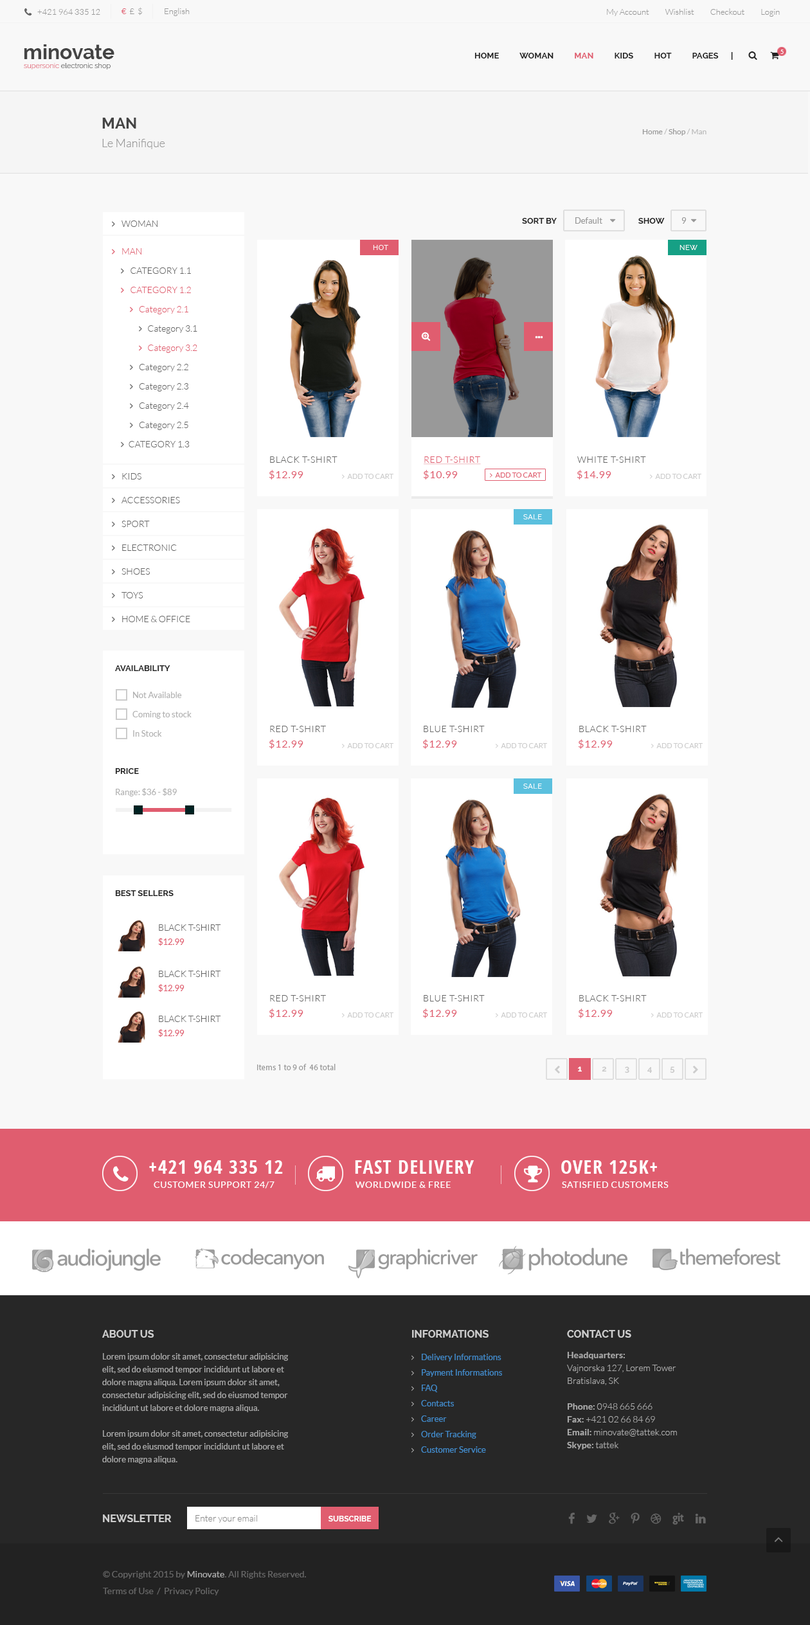
<style>
.page{position:relative;width:810px;height:1625px;background:#ffffff}
.page>*{position:absolute;margin:0}
.t1{font:8.4px "Lato-Light";color:#999999;text-transform:uppercase}
.t2{font:8.4px "Lato-Light";color:#999999}
.t3{font:8.4px "Lato-Light";color:#e05d6f}
.t4{font:20.6px "Raleway-Bold";color:#444444}
.t5{font:5.8px "Lato-Regular";color:#ffffff;text-transform:uppercase}
.t6{font:7.1px "Raleway-Light";color:#444444}
.t7{font:7.1px "Raleway-Light";color:#e05d6f}
.t8{font:15.4px "Raleway-Bold";color:#444444;text-transform:uppercase}
.t9{font:7.7px "Lato-Regular";color:#bbbbbb}
.t10{font:7.7px "Lato-Regular";color:#999999}
.t11{font:11.6px "Lato-Light";color:#999999}
.t12{font:9px "Lato-Light";color:#666666;text-transform:uppercase}
.t13{font:8.4px "Raleway-Bold";color:#222222;text-transform:uppercase}
.t14{font:7.1px "Raleway";letter-spacing:0.05em;color:#ffffff;text-transform:uppercase}
.t15{font:9px/19.3px "Lato-Light";color:#666666}
.t16{font:9px/19.3px "Lato-Light";color:#e05d6f;text-transform:uppercase}
.t17{font:9px/19.3px "Lato-Light";color:#666666;text-transform:uppercase}
.t18{font:9px/19.3px "Lato-Light";color:#e05d6f}
.t19{font:9px "Lato-Light";letter-spacing:0.05em;color:#666666;text-transform:uppercase}
.t20{font:9px "Lato-Light";letter-spacing:0.05em;color:#e05d6f;text-transform:uppercase;text-decoration:underline}
.t21{font:10.3px "Lato-Regular";letter-spacing:0.05em;color:#e05d6f;text-transform:uppercase}
.t22{font:8.4px/19.3px "Lato-Regular";color:#b2b2b2}
.t23{font:8.4px "Lato-Regular";color:#b2b2b2;text-transform:uppercase}
.t24{font:8.4px "Lato-Regular";color:#b2b2b2}
.t25{font:8.4px "Lato-Regular";color:#e05d6f}
.t26{font:8.4px "MyriadPro-Regular";color:#999999}
.t27{font:19.3px "OpenSans-CondensedBold";letter-spacing:0.05em;color:#ffffff;text-transform:uppercase}
.t28{font:9px "Lato-Regular";letter-spacing:0.05em;color:#ffffff;text-transform:uppercase}
.t29{font:10.3px "Raleway-Bold";color:#cccccc;text-transform:uppercase}
.t30{font:8.4px/12.9px "Lato-Regular";color:#aaaaaa}
.t31{font:8.4px/15.4px "Lato-Regular";color:#428bca}
.t32{font:9px/12.9px "Lato-Light";color:#aaaaaa}
.t33{font:9px/12.9px "Lato-Bold";color:#aaaaaa}
.t34{font:9px "Lato-Light";color:#8c8c8c}
.t35{font:7.7px "Raleway-Bold";color:#ffffff;text-transform:uppercase}
.t36{font:9px "Lato-Regular";color:#666666}
.t37{font:9px "Lato-Regular";color:#aaaaaa}
</style>
<div class="page">
<p class="t1" style="left:37px;top:9px;width:63px;height:6px">+421 964 335 12</p>
<p class="t2" style="left:122px;top:7px;width:20px;height:8px"><span class="t3">€</span>  £  $</p>
<p class="t2" style="left:165px;top:8px;width:25px;height:8px">English</p>
<p class="t2" style="left:607px;top:8px;width:173px;height:9px">My Account          Wishlist          Checkout          Login</p>
<p class="t4" style="left:24px;top:44px;width:90px;height:15px">minovate</p>
<p class="t5" style="left:780px;top:50px;width:4px;height:4px">5</p>
<p class="t6" style="left:24px;top:63px;width:87px;height:6px"><span class="t7">supersonic </span>electronic shop</p>
<p class="t8" style="left:102px;top:118px;width:34px;height:11px">Man</p>
<p class="t9" style="left:642px;top:129px;width:64px;height:7px"><span class="t10">Home </span>/<span class="t10"> Shop </span>/ Man</p>
<p class="t11" style="left:102px;top:139px;width:63px;height:10px">Le Manifique</p>
<p class="t12" style="left:122px;top:221px;width:36px;height:6px">Woman</p>
<p class="t13" style="left:522px;top:218px;width:143px;height:6px">Sort by                                         Show</p>
<p class="t14" style="left:373px;top:245px;width:15px;height:5px">Hot</p>
<p class="t14" style="left:680px;top:245px;width:18px;height:5px">NEW</p>
<p class="t15" style="left:122px;top:248px;width:75px;height:199px"><span class="t16">man<br></span><span class="t17">     CATEGORY 1.1<br>     </span><span class="t16">category 1.2<br>          </span><span class="t18">Category 2.1<br></span>               Category 3.1<br>               <span class="t18">Category 3.2<br></span>          Category 2.2<br>          Category 2.3<br>          Category 2.4<br>          Category 2.5<br><span class="t17">    category 1.3</span></p>
<p class="t19" style="left:270px;top:456px;width:68px;height:7px">Black T-Shirt</p>
<p class="t20" style="left:424px;top:456px;width:57px;height:9px">Red T-Shirt</p>
<p class="t19" style="left:577px;top:456px;width:69px;height:7px">White T-Shirt</p>
<p class="t12" style="left:122px;top:473px;width:19px;height:7px">kids</p>
<p class="t21" style="left:269px;top:470px;width:34px;height:10px">$12.99</p>
<p class="t21" style="left:424px;top:470px;width:34px;height:10px">$10.99</p>
<p class="t21" style="left:577px;top:470px;width:34px;height:10px">$14.99</p>
<p class="t12" style="left:122px;top:497px;width:58px;height:6px">Accessories</p>
<p class="t12" style="left:122px;top:521px;width:28px;height:6px">sport</p>
<p class="t14" style="left:523px;top:514px;width:19px;height:5px">Sale</p>
<p class="t12" style="left:122px;top:544px;width:55px;height:7px">electronic</p>
<p class="t12" style="left:122px;top:568px;width:28px;height:7px">shoes</p>
<p class="t12" style="left:122px;top:592px;width:21px;height:6px">Toys</p>
<p class="t12" style="left:122px;top:616px;width:68px;height:6px">Home &amp; Office</p>
<p class="t13" style="left:115px;top:665px;width:55px;height:6px">Availability</p>
<p class="t22" style="left:132px;top:692px;width:60px;height:45px">Not Available<br>Coming to stock<br>In Stock</p>
<p class="t19" style="left:270px;top:726px;width:56px;height:6px">Red T-Shirt</p>
<p class="t19" style="left:424px;top:726px;width:61px;height:6px">Blue T-Shirt</p>
<p class="t19" style="left:579px;top:726px;width:68px;height:6px">Black T-Shirt</p>
<p class="t21" style="left:269px;top:739px;width:34px;height:10px">$12.99</p>
<p class="t21" style="left:423px;top:739px;width:34px;height:10px">$12.99</p>
<p class="t21" style="left:579px;top:739px;width:34px;height:10px">$12.99</p>
<p class="t13" style="left:115px;top:768px;width:24px;height:6px">Price</p>
<p class="t14" style="left:523px;top:784px;width:19px;height:5px">Sale</p>
<p class="t23" style="left:116px;top:788px;width:61px;height:9px">r<span class="t24">ange</span>: $36 - $89</p>
<p class="t13" style="left:115px;top:890px;width:59px;height:6px">best sellers</p>
<p class="t12" style="left:159px;top:924px;width:62px;height:7px">Black T-shirt</p>
<p class="t25" style="left:158px;top:938px;width:26px;height:8px">$12.99</p>
<p class="t12" style="left:159px;top:971px;width:62px;height:6px">Black T-shirt</p>
<p class="t25" style="left:158px;top:984px;width:26px;height:8px">$12.99</p>
<p class="t19" style="left:270px;top:995px;width:56px;height:7px">Red T-Shirt</p>
<p class="t19" style="left:424px;top:995px;width:61px;height:7px">Blue T-Shirt</p>
<p class="t19" style="left:579px;top:995px;width:68px;height:7px">Black T-Shirt</p>
<p class="t21" style="left:269px;top:1009px;width:34px;height:9px">$12.99</p>
<p class="t21" style="left:423px;top:1009px;width:34px;height:9px">$12.99</p>
<p class="t21" style="left:579px;top:1009px;width:34px;height:9px">$12.99</p>
<p class="t12" style="left:159px;top:1016px;width:62px;height:6px">Black T-shirt</p>
<p class="t25" style="left:158px;top:1029px;width:26px;height:8px">$12.99</p>
<p class="t26" style="left:257px;top:1064px;width:79px;height:6px">Items 1 to 9 of  46 total</p>
<p class="t27" style="left:149px;top:1160px;width:134px;height:14px">+421 964 335 12</p>
<p class="t27" style="left:355px;top:1160px;width:119px;height:14px">fast delivery</p>
<p class="t27" style="left:561px;top:1160px;width:96px;height:14px">over 125k+</p>
<p class="t28" style="left:154px;top:1182px;width:120px;height:7px">Customer support 24/7</p>
<p class="t28" style="left:356px;top:1182px;width:95px;height:6px">worldwide &amp; free</p>
<p class="t28" style="left:562px;top:1182px;width:107px;height:6px">satisfied customers</p>
<p class="t29" style="left:102px;top:1330px;width:52px;height:8px">About Us</p>
<p class="t29" style="left:412px;top:1330px;width:77px;height:8px">Informations</p>
<p class="t29" style="left:567px;top:1330px;width:64px;height:8px">Contact Us</p>
<p class="t30" style="left:102px;top:1353px;width:187px;height:111px">Lorem ipsum dolor sit amet, consectetur adipisicing elit, sed do eiusmod tempor incididunt ut labore et dolore magna aliqua. Lorem ipsum dolor sit amet, consectetur adipisicing elit, sed do eiusmod tempor incididunt ut labore et dolore magna aliqua. <br><br>Lorem ipsum dolor sit amet, consectetur adipisicing elit, sed do eiusmod tempor incididunt ut labore et dolore magna aliqua.</p>
<p class="t31" style="left:421px;top:1354px;width:81px;height:99px">Delivery Informations<br>Payment Informations<br>FAQ<br>Contacts<br>Career<br>Order Tracking<br>Customer Service</p>
<p class="t32" style="left:567px;top:1352px;width:110px;height:98px"><span class="t33">Headquarters:<br></span>Vajnorska 127, Lorem Tower<br>Bratislava, SK<br><br><span class="t33">Phone: </span>0948 665 666<br><span class="t33">Fax: </span>+421 02 66 84 69<br><span class="t33">Email: </span>minovate@tattek.com<br><span class="t33">Skype:</span> tattek</p>
<p class="t29" style="left:103px;top:1515px;width:69px;height:7px">Newsletter</p>
<p class="t34" style="left:195px;top:1515px;width:62px;height:8px">Enter your email</p>
<p class="t35" style="left:328px;top:1516px;width:44px;height:6px">Subscribe</p>
<p class="t36" style="left:103px;top:1571px;width:203px;height:8px">© Copyright 2015 by <span class="t37">Minovate</span>. All Rights Reserved.</p>
<p class="t36" style="left:103px;top:1588px;width:116px;height:8px">Terms of Use  /  Privacy Policy</p>
</div>
